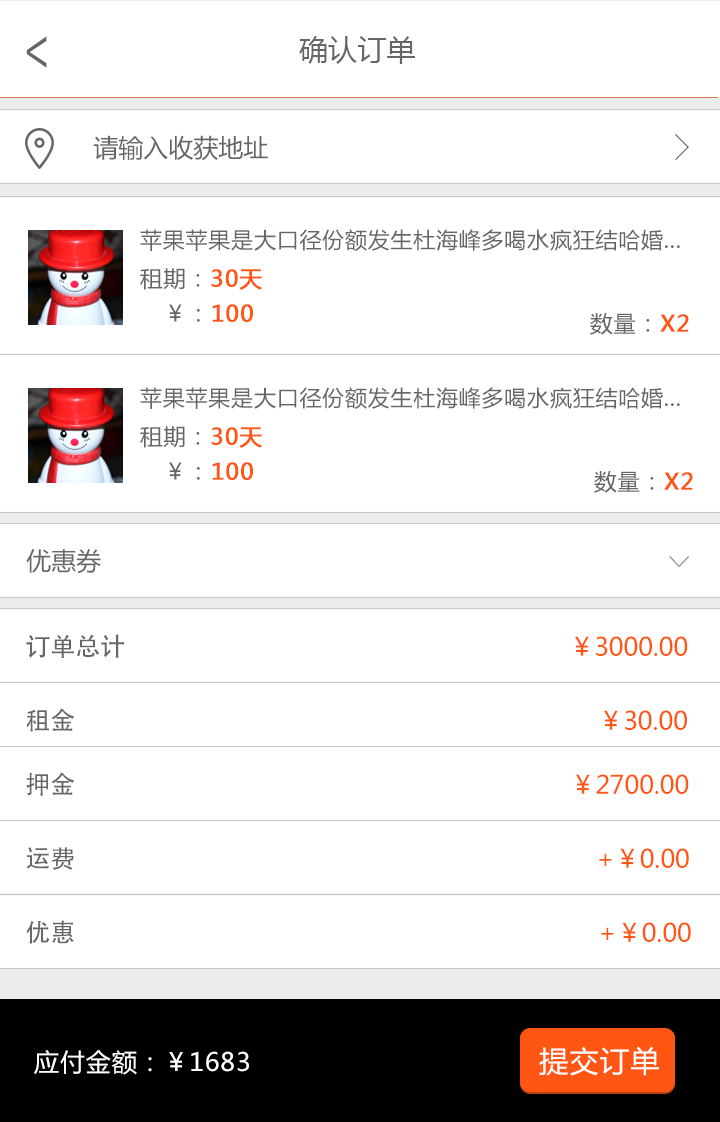
<style>
.page{position:relative;width:720px;height:1122px;background:#ffffff}
.page>*{position:absolute;margin:0}
.t1{font:51.9px "AdobeHeitiStd-Regular";color:#666666;scale:0.72 1}
.t2{font:29.2px "MicrosoftYaHei";color:#666666}
.t3{font:25px "MicrosoftYaHei";color:#666666}
.t4{font:37.5px "SimSun";color:#666666}
.t5{font:22px "MicrosoftYaHei";letter-spacing:0.035em;color:#666666}
.t6{font:22.6px "MicrosoftYaHei";letter-spacing:0.035em;color:#666666}
.t7{font:22.6px "MicrosoftYaHei";letter-spacing:0.035em;color:#ff5614;font-weight:bold}
.t8{font:25px "AdobeHeitiStd-Regular";color:#666666}
.t9{font:25px "MicrosoftYaHei";color:#ff5614}
.t10{font:29.3px "MicrosoftYaHei";letter-spacing:0.035em;color:#fffefe}
.t11{font:25px "MicrosoftYaHei";letter-spacing:0.035em;color:#fffefe}
</style>
<div class="page">
<p class="t1" style="left:26px;top:36px;width:21px;height:32px;rotate:180deg">&gt;</p>
<p class="t2" style="left:299px;top:36px;width:116px;height:28px">确认订单</p>
<p class="t3" style="left:93px;top:135px;width:175px;height:26px">请输入收获地址</p>
<p class="t4" style="left:675px;top:134px;width:14px;height:27px">&gt;</p>
<p class="t5" style="left:140px;top:229px;width:540px;height:22px">苹果苹果是大口径份额发生杜海峰多喝水疯狂结哈婚...</p>
<p class="t6" style="left:140px;top:268px;width:122px;height:22px">租期：<span class="t7">30天</span></p>
<p class="t7" style="left:169px;top:304px;width:84px;height:18px"><span class="t6">￥：</span>100</p>
<p class="t6" style="left:590px;top:312px;width:99px;height:23px">数量：<span class="t7">X2</span></p>
<p class="t5" style="left:140px;top:387px;width:540px;height:22px">苹果苹果是大口径份额发生杜海峰多喝水疯狂结哈婚...</p>
<p class="t6" style="left:140px;top:426px;width:122px;height:22px">租期：<span class="t7">30天</span></p>
<p class="t7" style="left:169px;top:462px;width:84px;height:18px"><span class="t6">￥：</span>100</p>
<p class="t6" style="left:594px;top:470px;width:99px;height:23px">数量：<span class="t7">X2</span></p>
<p class="t3" style="left:26px;top:549px;width:75px;height:25px">优惠券</p>
<p class="t8" style="left:26px;top:634px;width:98px;height:24px">订单总计</p>
<p class="t9" style="left:575px;top:636px;width:113px;height:20px">￥3000.00</p>
<p class="t8" style="left:26px;top:708px;width:49px;height:24px">租金</p>
<p class="t9" style="left:604px;top:710px;width:83px;height:20px">￥30.00</p>
<p class="t8" style="left:26px;top:772px;width:49px;height:24px">押金</p>
<p class="t9" style="left:576px;top:774px;width:113px;height:20px">￥2700.00</p>
<p class="t8" style="left:26px;top:847px;width:48px;height:23px">运费</p>
<p class="t9" style="left:599px;top:848px;width:90px;height:20px">+￥0.00</p>
<p class="t8" style="left:26px;top:920px;width:48px;height:24px">优惠</p>
<p class="t9" style="left:601px;top:922px;width:90px;height:20px">+￥0.00</p>
<p class="t10" style="left:539px;top:1046px;width:120px;height:30px">提交订单</p>
<p class="t11" style="left:34px;top:1050px;width:215px;height:25px">应付金额：￥1683</p>
</div>
